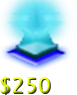
<style>
.page{position:relative;width:77px;height:95px;background:#ffffff}
.page>*{position:absolute;margin:0}
.t1{font:22px "LucidaConsole"}
</style>
<div class="page">
<p class="t1" style="left:0px;top:76px;width:50px;height:18px">$250</p>
</div>
